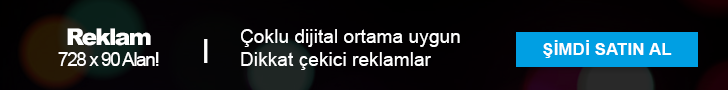
<style>
.page{position:relative;width:728px;height:90px}
.page>*{position:absolute;margin:0}
.t1{font:23px "Arial-Black";letter-spacing:-0.08em;color:#ffffff}
.t2{font:19px "ArialMT";color:#ffffff}
.t3{font:33px "ArialMT";letter-spacing:-0.08em;color:#ffffff}
.t4{font:17px "Arial-BoldMT";color:#ffffff}
.t5{font:19px "ArialMT";letter-spacing:-0.08em;color:#ffffff}
</style>
<div class="page">
<p class="t1" style="left:67px;top:28px;width:84px;height:18px">Reklam</p>
<p class="t2" style="left:241px;top:29px;width:219px;height:41px">Çoklu dijital ortama uygun<br>Dikkat çekici reklamlar</p>
<p class="t3" style="left:204px;top:39px;width:4px;height:24px">I</p>
<p class="t4" style="left:543px;top:40px;width:129px;height:18px">ŞİMDİ SATIN AL</p>
<p class="t5" style="left:58px;top:52px;width:101px;height:14px">728 x 90 Alan!</p>
</div>
